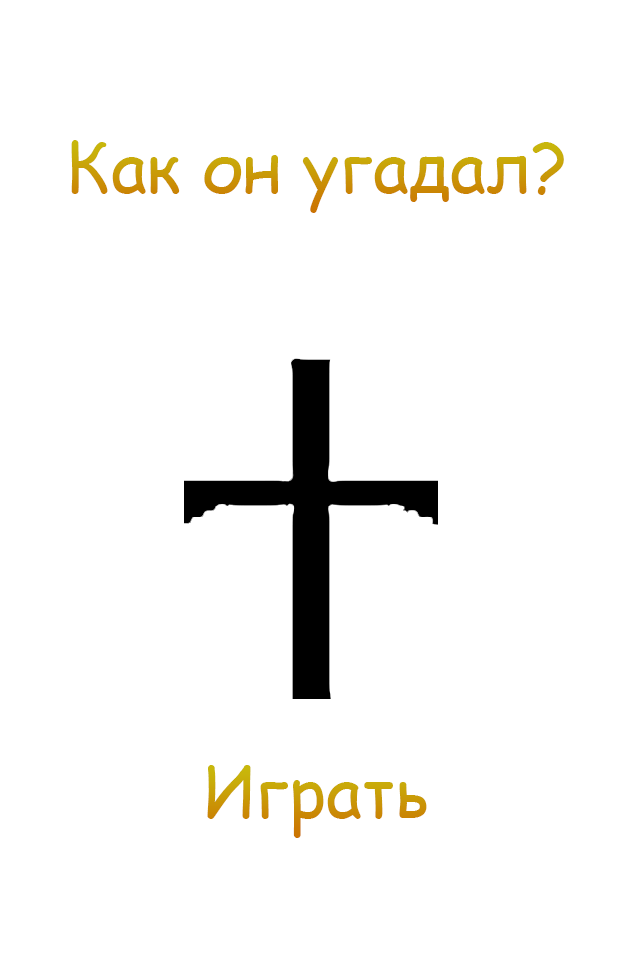
<style>
.page{position:relative;width:623px;height:965px;background:#ffffff}
.page>*{position:absolute;margin:0}
.t1{font:70px "ComicSansMS";color:#c99907}
.t2{font:70px "ComicSansMS";color:#c99b07}
</style>
<div class="page">
<p class="t1" style="left:71px;top:140px;width:493px;height:73px">Как он угадал?</p>
<p class="t2" style="left:207px;top:765px;width:220px;height:73px">Играть</p>
</div>
